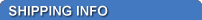
<style>
.page{position:relative;width:202px;height:20px;background:#4379c1}
.page>*{position:absolute;margin:0}
.t1{font:13.3px "Arial-BoldMT";color:#ffffff}
</style>
<div class="page">
<p class="t1" style="left:9px;top:5px;width:99px;height:11px">SHIPPING INFO</p>
</div>
